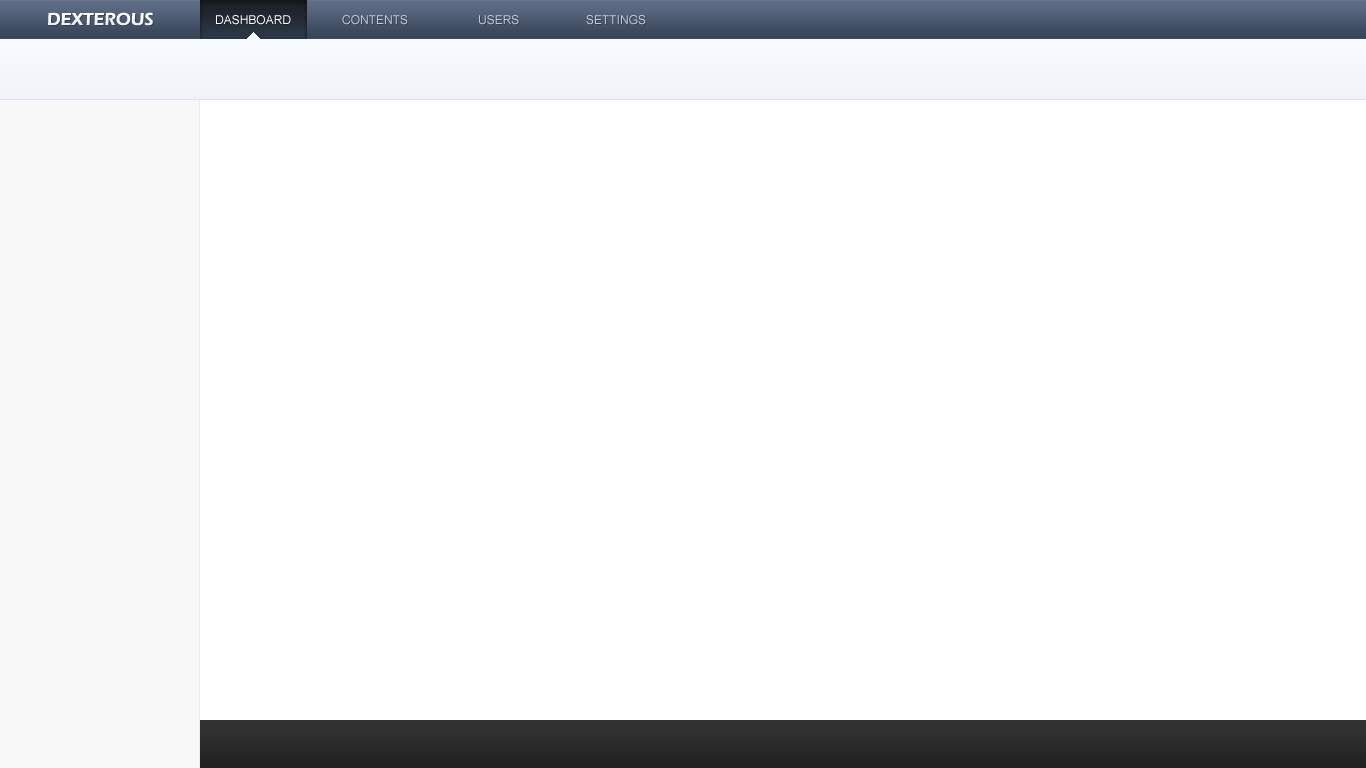
<style>
.page{position:relative;width:1366px;height:768px;background:#ffffff}
.page>*{position:absolute;margin:0}
.t1{font:18px "ErasITC-Demi";color:#ffffff}
.t2{font:12px "ArialMT";color:#ffffff;text-transform:uppercase}
.t3{font:12px "ArialMT";color:#bfcad5;text-transform:uppercase}
</style>
<div class="page">
<p class="t1" style="left:48px;top:12px;width:105px;height:14px">DEXTEROUS</p>
<p class="t2" style="left:216px;top:15px;width:75px;height:10px">Dashboard</p>
<p class="t3" style="left:342px;top:15px;width:66px;height:10px">Contents</p>
<p class="t3" style="left:479px;top:15px;width:40px;height:10px">Users</p>
<p class="t3" style="left:586px;top:15px;width:60px;height:10px">Settings</p>
</div>
